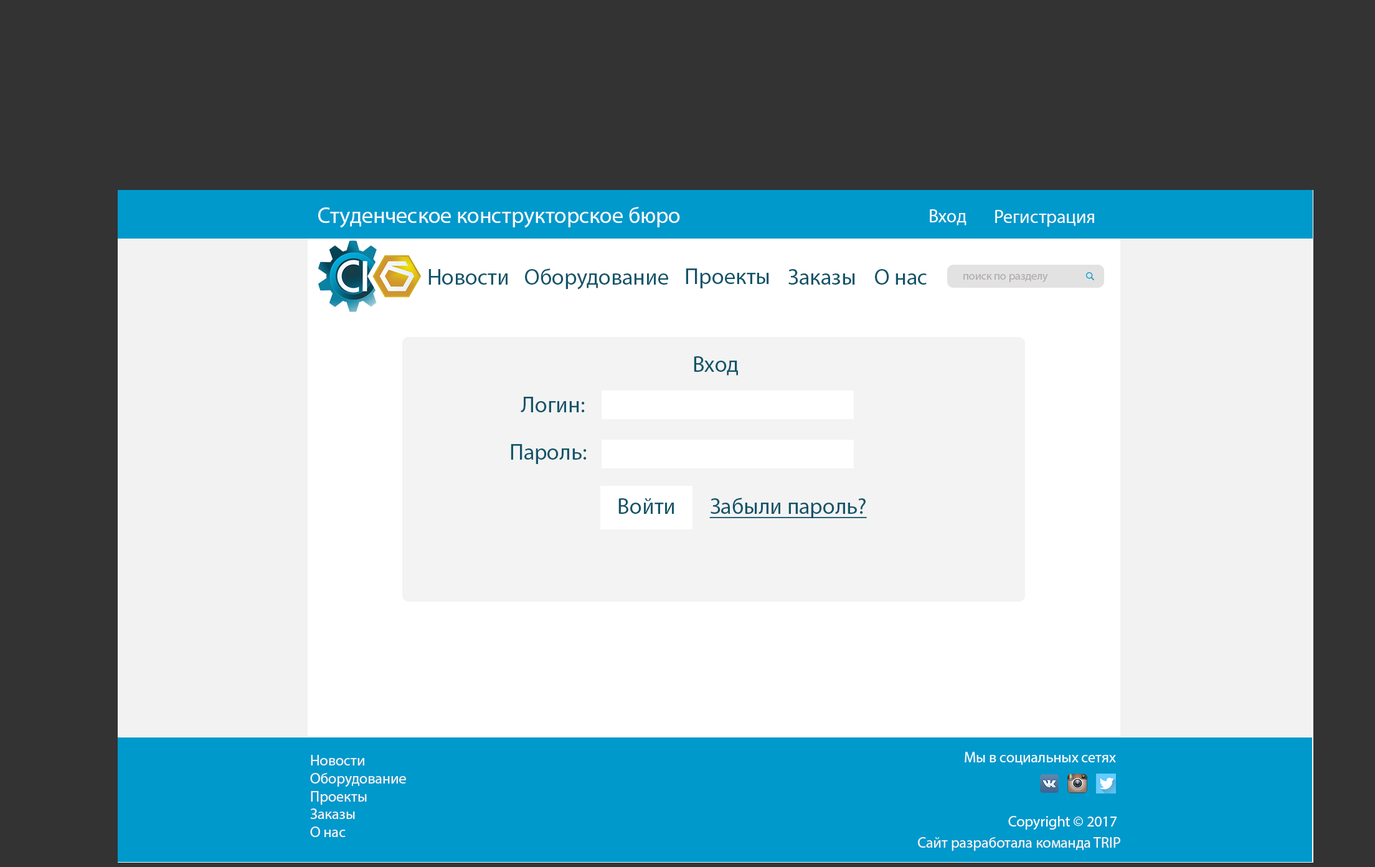
<style>
.page{position:relative;width:1375px;height:867px;background:#333333}
.page>*{position:absolute;margin:0}
.t1{font:22.4px "MyriadPro-Regular";color:#f8fdff}
.t2{font:18.7px "MyriadPro-Regular";color:#f8fdff}
.t3{font:22.4px "MyriadPro-Regular";color:#12556a}
.t4{font:11.2px "MyriadPro-Regular";color:#b3adad}
.t5{font:22.4px "MyriadPro-Regular";color:#12556a;text-decoration:underline}
.t6{font:14.9px "MyriadPro-Regular";color:#f8f3f3}
.t7{font:14.9px "MyriadPro-Regular";color:#f8fdff}
</style>
<div class="page">
<p class="t1" style="left:318px;top:207px;width:362px;height:21px">Студенческое конструкторское бюро</p>
<p class="t2" style="left:930px;top:209px;width:37px;height:16px">Вход</p>
<p class="t2" style="left:995px;top:210px;width:99px;height:17px">Регистрация</p>
<p class="t3" style="left:429px;top:269px;width:79px;height:16px">Новости</p>
<p class="t3" style="left:525px;top:268px;width:143px;height:22px">Оборудование</p>
<p class="t3" style="left:686px;top:268px;width:83px;height:20px">Проекты</p>
<p class="t3" style="left:789px;top:269px;width:66px;height:16px">Заказы</p>
<p class="t3" style="left:875px;top:269px;width:52px;height:16px">О нас</p>
<p class="t4" style="left:964px;top:274px;width:84px;height:8px">поиск по разделу</p>
<p class="t3" style="left:694px;top:356px;width:44px;height:20px">Вход</p>
<p class="t3" style="left:521px;top:397px;width:64px;height:15px">Логин:</p>
<p class="t3" style="left:511px;top:444px;width:76px;height:20px">Пароль:</p>
<p class="t5" style="left:709px;top:498px;width:158px;height:20px">Забыли пароль?</p>
<p class="t3" style="left:619px;top:498px;width:55px;height:16px">Войти</p>
<p class="t6" style="left:310px;top:755px;width:96px;height:82px">Новости<br>Оборудование<br>Проекты<br>Заказы<br>О нас</p>
<p class="t7" style="left:965px;top:752px;width:151px;height:13px">Мы в социальных сетях</p>
<p class="t7" style="left:1008px;top:816px;width:109px;height:14px">Copyright © 2017</p>
<p class="t6" style="left:918px;top:837px;width:203px;height:14px">Сайт разработала команда TRIP</p>
</div>
